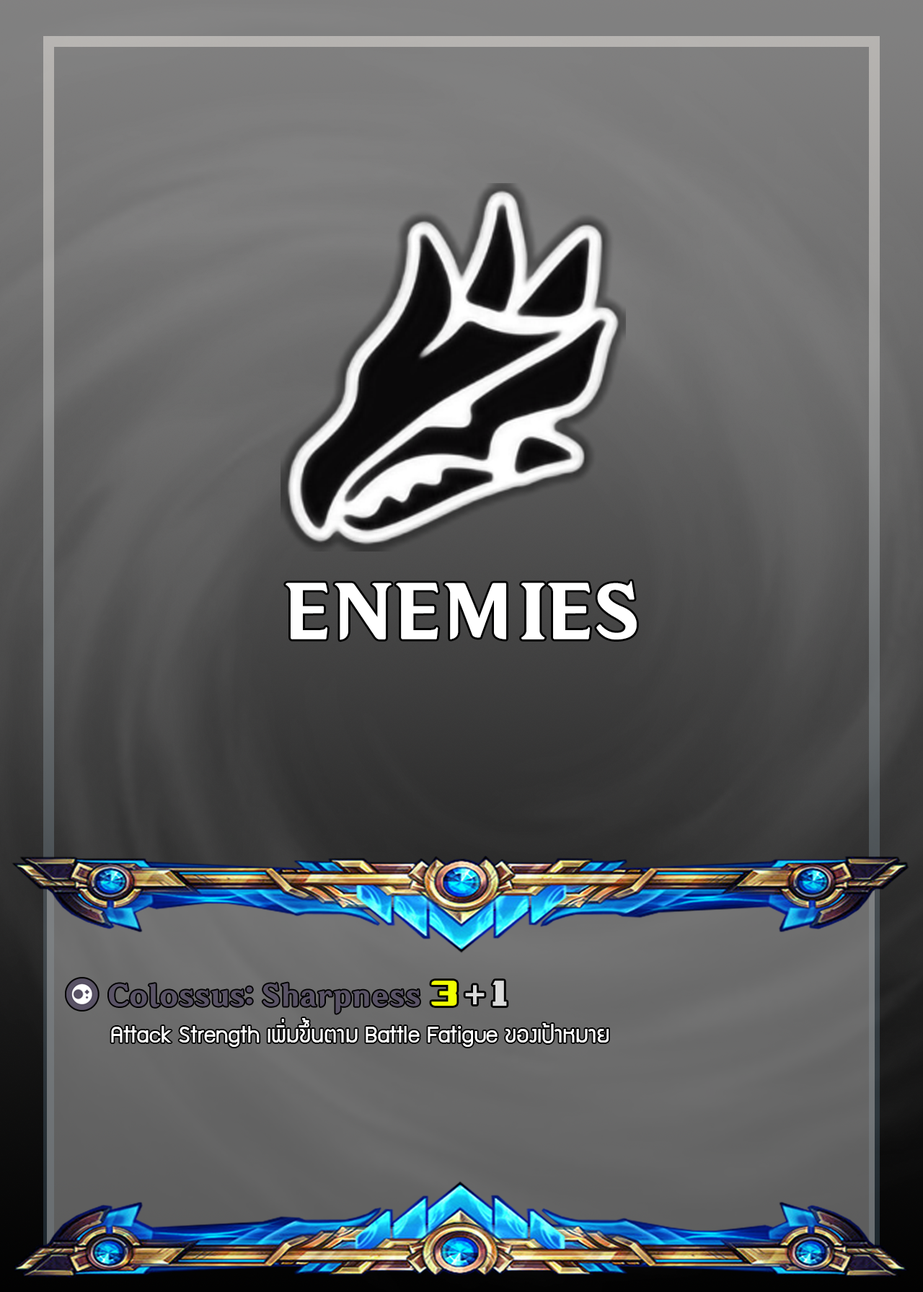
<style>
.page{position:relative;width:923px;height:1292px}
.page>*{position:absolute;margin:0}
.t1{font:70.8px "HYWenHei-HEW";color:#ffffff}
.t2{font:35.9px "LaOrientalBold";color:#f0ff00}
.t3{font:35.9px "MyriadPro-Bold";color:#dadada}
.t4{font:35.9px "LaOrientalBold";color:#dadada}
.t5{font:25.6px "supermarket";color:#ffffff}
</style>
<div class="page">
<p class="t1" style="left:286px;top:581px;width:351px;height:59px">ENEMIES</p>
<p class="t2" style="left:431px;top:981px;width:26px;height:25px">3</p>
<p class="t3" style="left:465px;top:985px;width:20px;height:19px">+</p>
<p class="t4" style="left:492px;top:981px;width:15px;height:25px">1</p>
<p class="t5" style="left:111px;top:1018px;width:498px;height:29px">Attack Strength เพิ่มขึ้นตาม Battle Fatigue ของเป้าหมาย</p>
</div>
